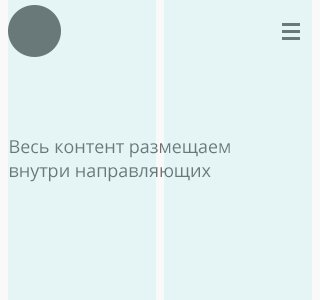
<style>
.page{position:relative;width:320px;height:300px;background:#e5f4f4}
.page>*{position:absolute;margin:0}
.t1{font:18px/24px "OpenSans";color:#6f6f6f}
</style>
<div class="page">
<p class="t1" style="left:10px;top:140px;width:220px;height:42px">Весь контент размещаем внутри направляющих</p>
</div>
